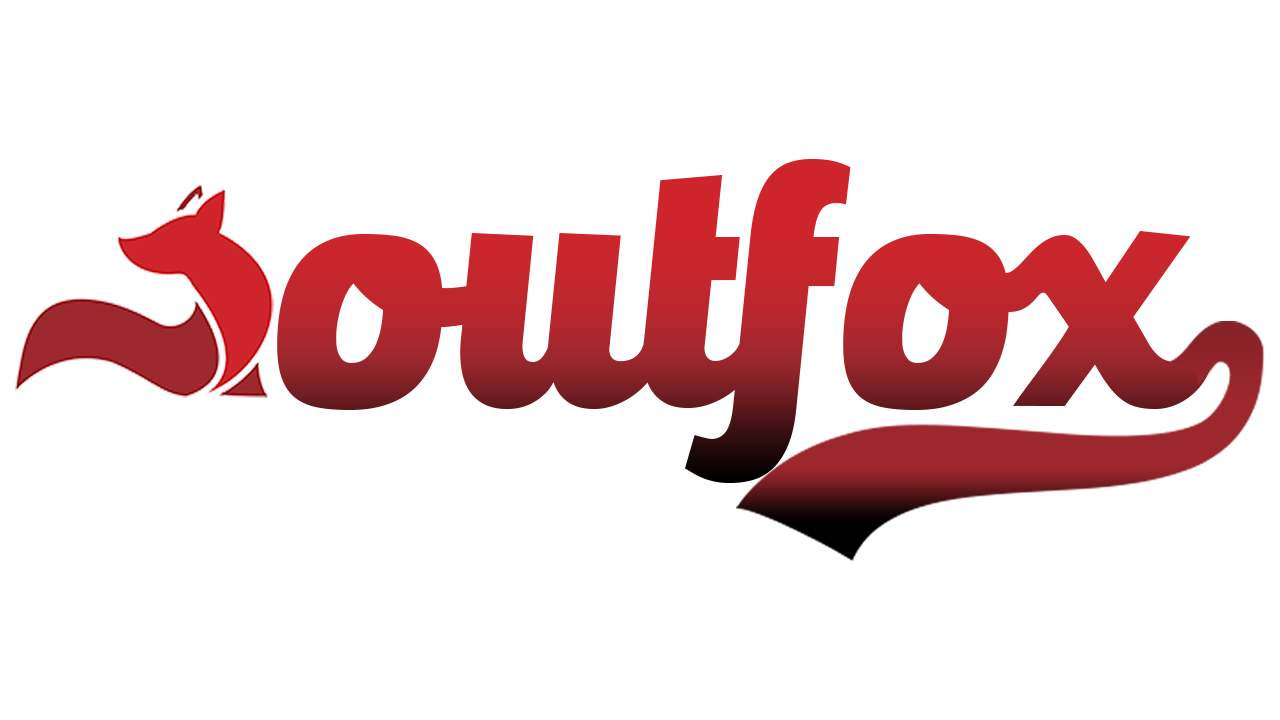
<style>
.page{position:relative;width:1280px;height:720px;background:#ffffff}
.page>*{position:absolute;margin:0}
.t1{font:321.7px "BullettoKilla"}
</style>
<div class="page">
<p class="t1" style="left:277px;top:159px;width:935px;height:324px">outfox</p>
</div>
